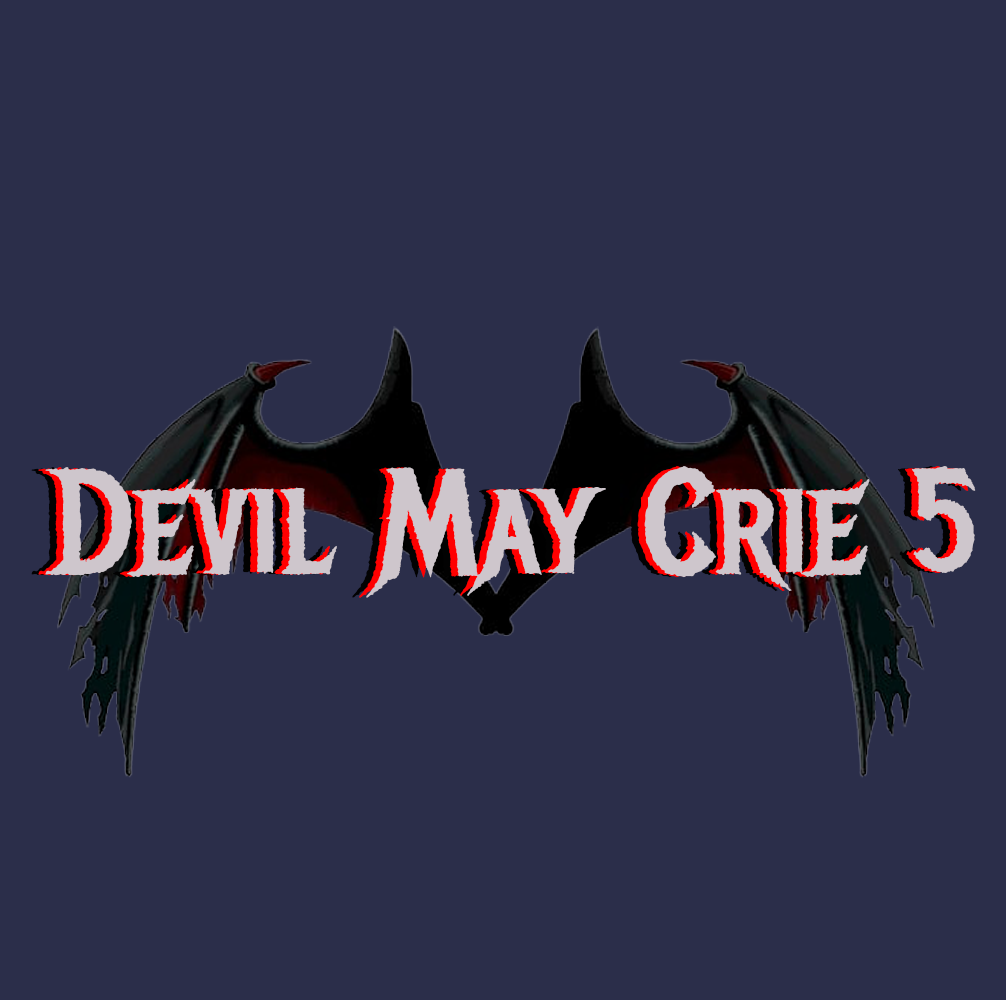
<style>
.page{position:relative;width:1006px;height:1000px;background:#2b2e4a}
.page>*{position:absolute;margin:0}
.t1{font:145.8px "MetalMania-Regular"}
.t2{font:145.8px "MetalMania-Regular";color:#cec6cc}
</style>
<div class="page">
<p class="t1" style="left:31px;top:466px;width:931px;height:132px">Devil May Crie 5</p>
<p class="t1" style="left:38px;top:466px;width:931px;height:132px">Devil May Crie 5</p>
<p class="t2" style="left:45px;top:466px;width:931px;height:132px">Devil May Crie 5</p>
</div>
